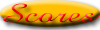
<style>
.page{position:relative;width:100px;height:30px}
.page>*{position:absolute;margin:0}
.t1{font:26.2px "AmazoneBT-Regular";scale:1.49 1}
</style>
<div class="page">
<p class="t1" style="left:3px;top:3px;width:97px;height:20px">Scores</p>
</div>
